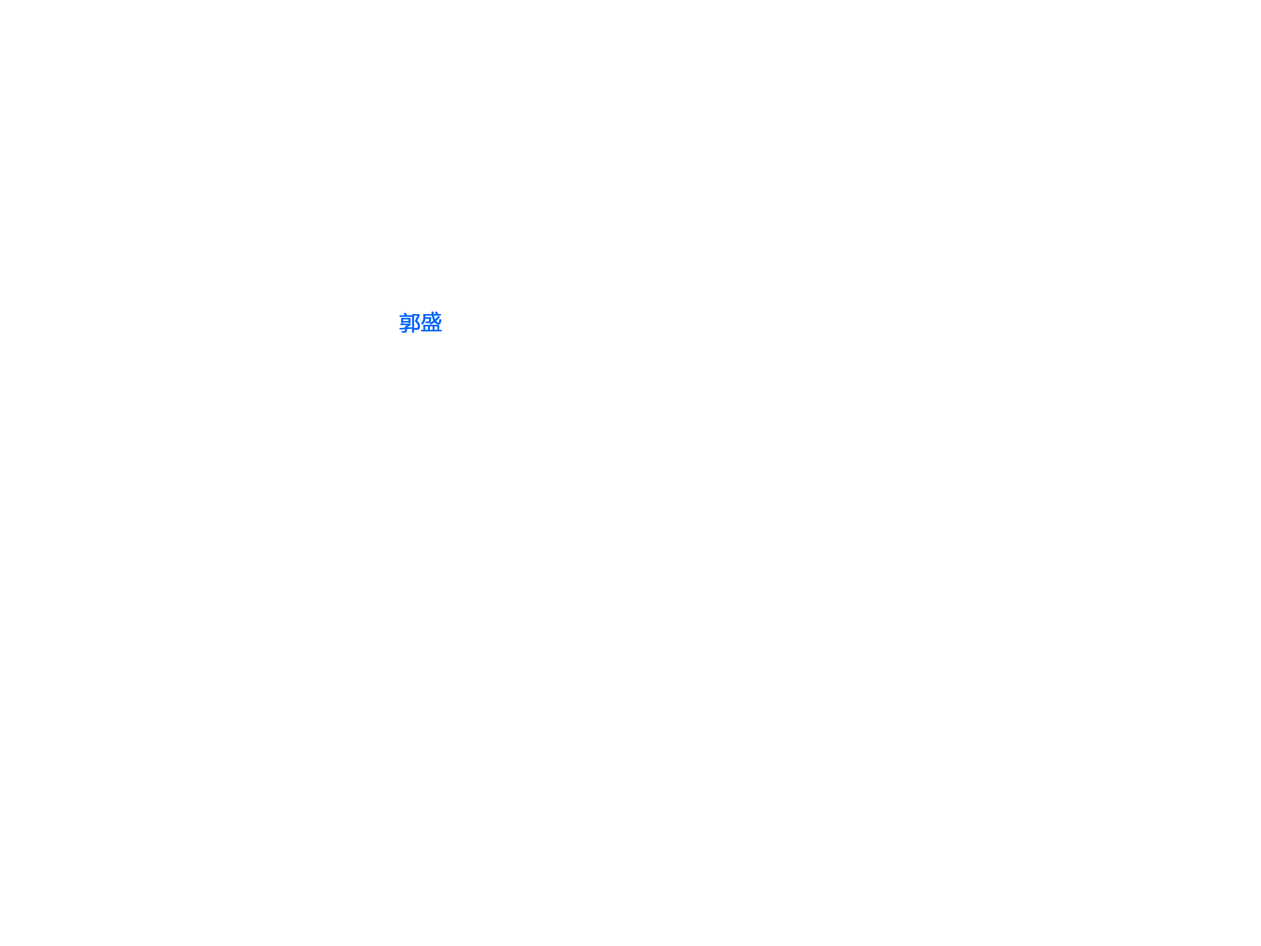
<style>
.page{position:relative;width:1261px;height:946px;background:#ffffff}
.page>*{position:absolute;margin:0}
.t1{font:21px "MicrosoftYaHei";color:#0066ff;font-weight:bold}
</style>
<div class="page">
<p class="t1" style="left:399px;top:311px;width:43px;height:22px">郭盛</p>
</div>
